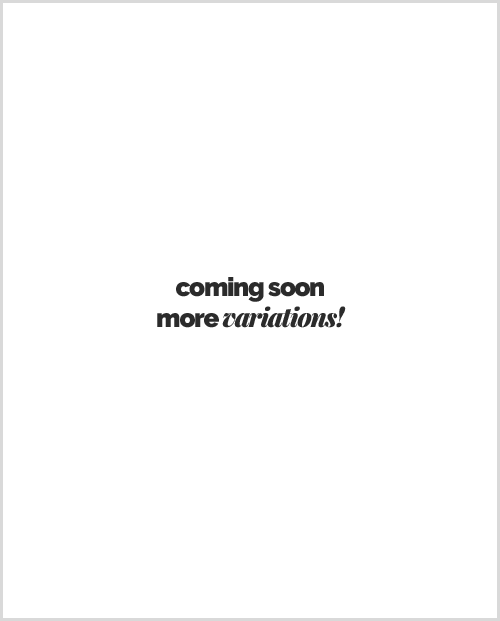
<style>
.page{position:relative;width:500px;height:621px;background:#ffffff}
.page>*{position:absolute;margin:0}
.t1{font:26px "Raleway-Black";letter-spacing:-0.05em;color:#2b2b2b}
.t2{font:26px "PlayfairDisplay-BlackItalic";letter-spacing:-0.05em;color:#2b2b2b}
</style>
<div class="page">
<p class="t1" style="left:157px;top:277px;width:189px;height:51px;text-align:center">coming soon<br>more <span class="t2">variations!</span></p>
</div>
